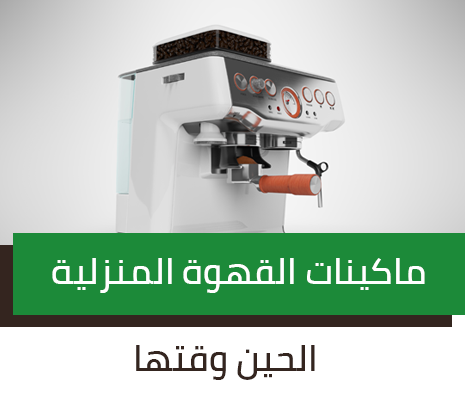
<style>
.page{position:relative;width:465px;height:400px}
.page>*{position:absolute;margin:0}
.t1{font:35.9px "Cairo-SemiBold";color:#ffffff}
.t2{font:35.9px "Cairo-SemiBold";color:#34251f}
</style>
<div class="page">
<p class="t1" style="left:52px;top:258px;width:373px;height:35px">ماكينات القهوة المنزلية</p>
<p class="t2" style="left:136px;top:345px;width:179px;height:35px">الحين وقتها</p>
</div>
